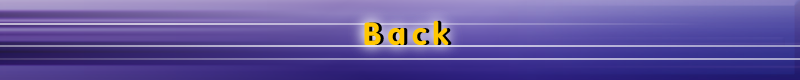
<style>
.page{position:relative;width:800px;height:80px}
.page>*{position:absolute;margin:0}
.t1{font:31.6px "FZY4JW--GB1-0";letter-spacing:0.2em;color:#ffc701}
.t2{font:31.6px "FZY4JW--GB1-0";letter-spacing:0.2em}
</style>
<div class="page">
<p class="t1" style="left:364px;top:20px;width:85px;height:25px">Back</p>
<p class="t2" style="left:367px;top:20px;width:85px;height:25px">Back</p>
</div>
